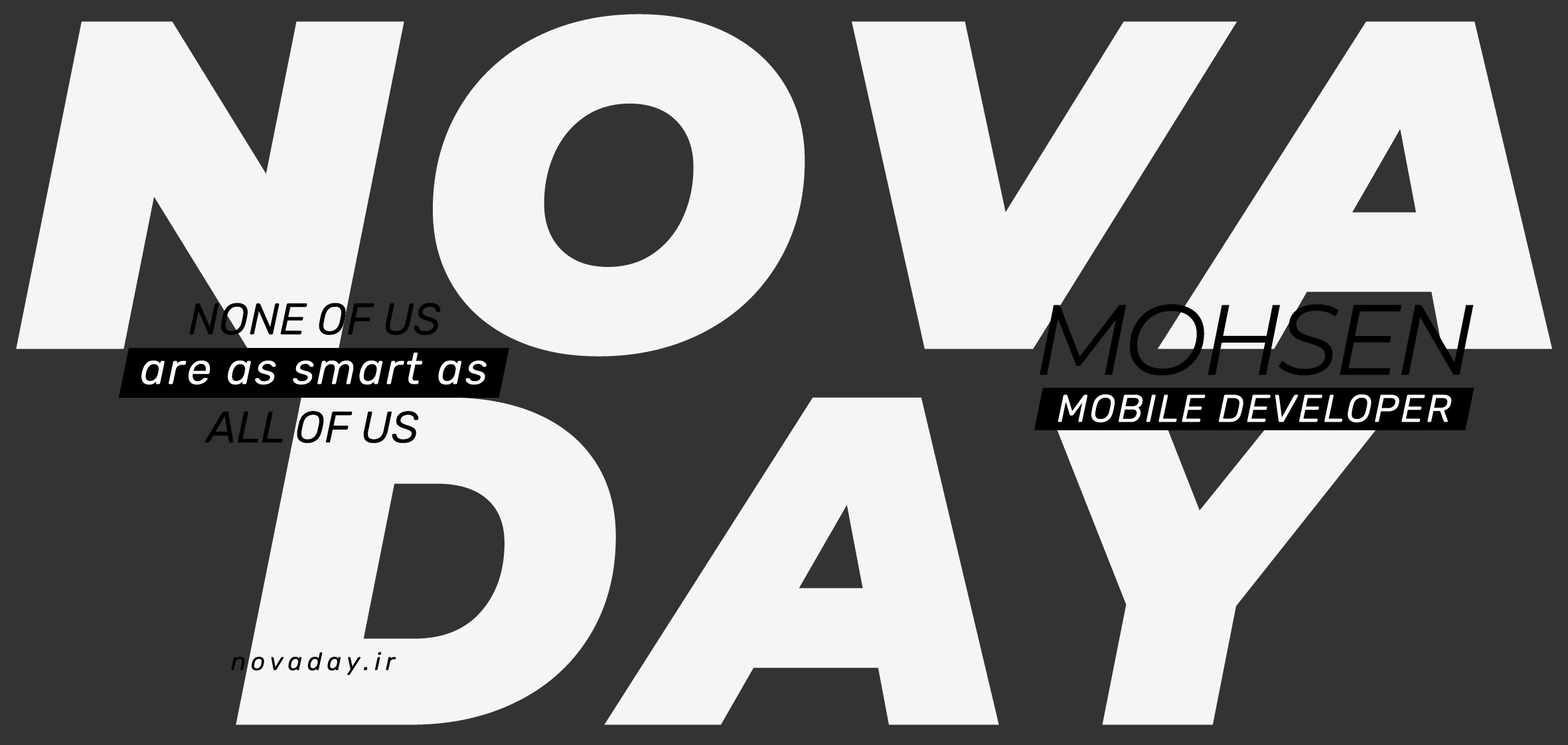
<style>
.page{position:relative;width:1568px;height:745px;background:#333333}
.page>*{position:absolute;margin:0}
.t1{font:467.1px/375.8px "Montserrat-BlackItalic";letter-spacing:0.05em;color:#f5f5f5}
.t2{font:44.3px "Rubik-Italic";color:#000000}
.t3{font:99.6px "Montserrat-Italic";letter-spacing:-0.05em;color:#000000}
.t4{font:44.3px "Rubik-Italic";letter-spacing:0.05em;color:#ffffff}
.t5{font:38.7px "Rubik-Italic";letter-spacing:0.05em;color:#ffffff}
.t6{font:24.9px "Rubik-Italic";letter-spacing:0.2em;color:#000000}
</style>
<div class="page">
<p class="t1" style="left:16px;top:14px;width:1536px;height:711px;text-align:center">NOVA<br>DAY</p>
<p class="t2" style="left:189px;top:303px;width:252px;height:32px">NONE OF US</p>
<p class="t3" style="left:1040px;top:304px;width:434px;height:72px">MOHSEN</p>
<p class="t4" style="left:141px;top:353px;width:346px;height:32px">are as smart as</p>
<p class="t5" style="left:1058px;top:394px;width:394px;height:29px">MOBILE DEVELOPER</p>
<p class="t2" style="left:205px;top:411px;width:214px;height:32px">ALL OF US</p>
<p class="t6" style="left:231px;top:652px;width:165px;height:23px">novaday.ir</p>
</div>
